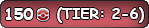
<style>
.page{position:relative;width:149px;height:28px}
.page>*{position:absolute;margin:0}
.t1{font:12px "ComicSansMS-Bold";color:#ffffff}
.t2{font:14.7px "ComicSansMS-Bold";color:#ffffff}
</style>
<div class="page">
<p class="t1" style="left:5px;top:8px;width:29px;height:12px">150</p>
<p class="t2" style="left:57px;top:7px;width:87px;height:16px">(TIER: 2-6)</p>
</div>
